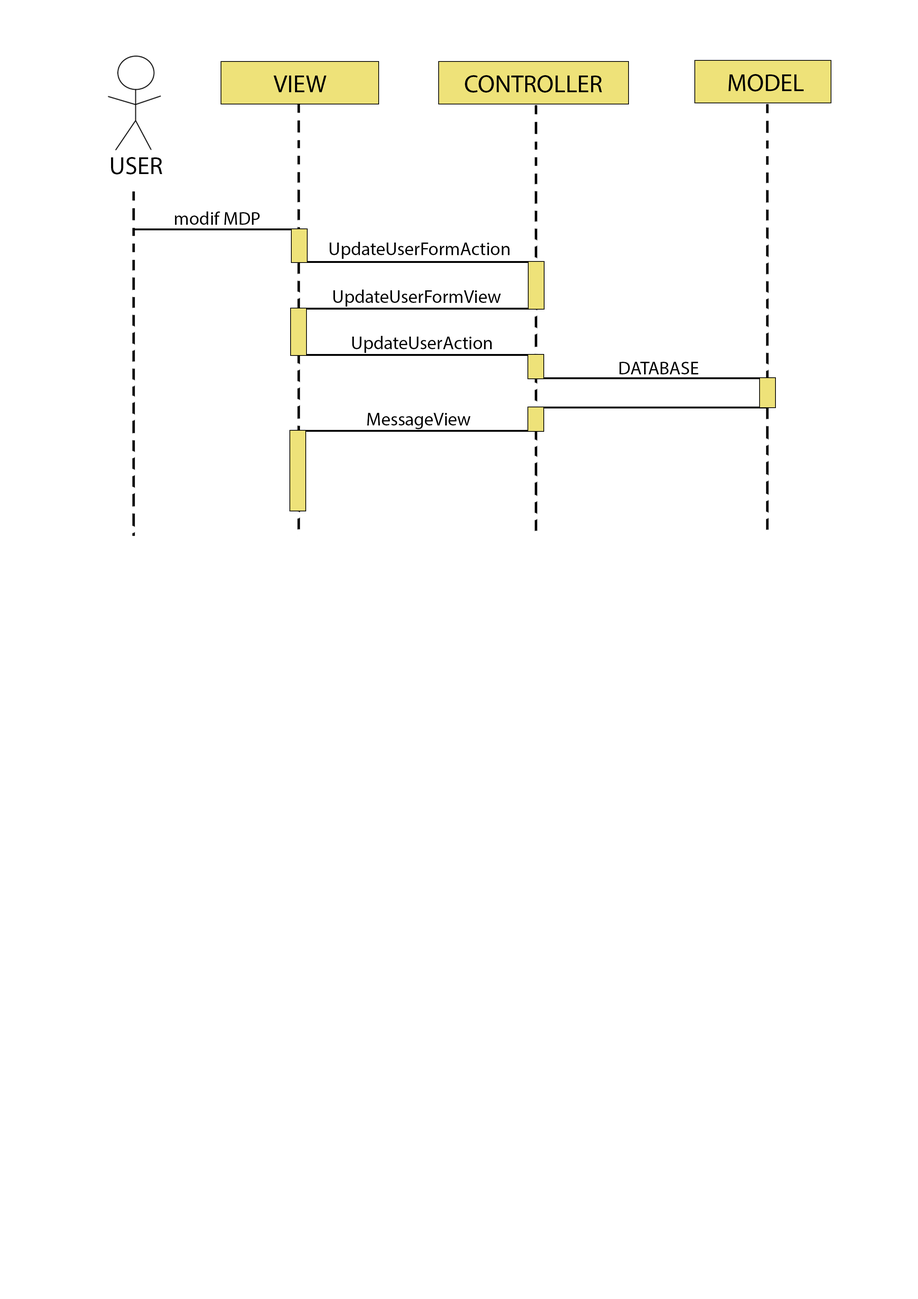
<style>
.page{position:relative;width:918px;height:1299px;background:#ffffff}
.page>*{position:absolute;margin:0}
.t1{font:24.7px "MyriadPro-Regular";color:#000000}
.t2{font:18.5px "MyriadPro-Regular";color:#000000}
</style>
<div class="page">
<p class="t1" style="left:274px;top:76px;width:53px;height:16px">VIEW</p>
<p class="t1" style="left:465px;top:75px;width:137px;height:18px">CONTROLLER</p>
<p class="t1" style="left:729px;top:74px;width:75px;height:17px">MODEL</p>
<p class="t1" style="left:111px;top:157px;width:52px;height:17px">USER</p>
<p class="t2" style="left:175px;top:211px;width:85px;height:14px">modif MDP</p>
<p class="t2" style="left:329px;top:242px;width:181px;height:17px">UpdateUserFormAction</p>
<p class="t2" style="left:333px;top:290px;width:168px;height:17px">UpdateUserFormView</p>
<p class="t2" style="left:352px;top:336px;width:140px;height:17px">UpdateUserAction</p>
<p class="t2" style="left:619px;top:362px;width:80px;height:12px">DATABASE</p>
<p class="t2" style="left:367px;top:413px;width:104px;height:16px">MessageView</p>
</div>
